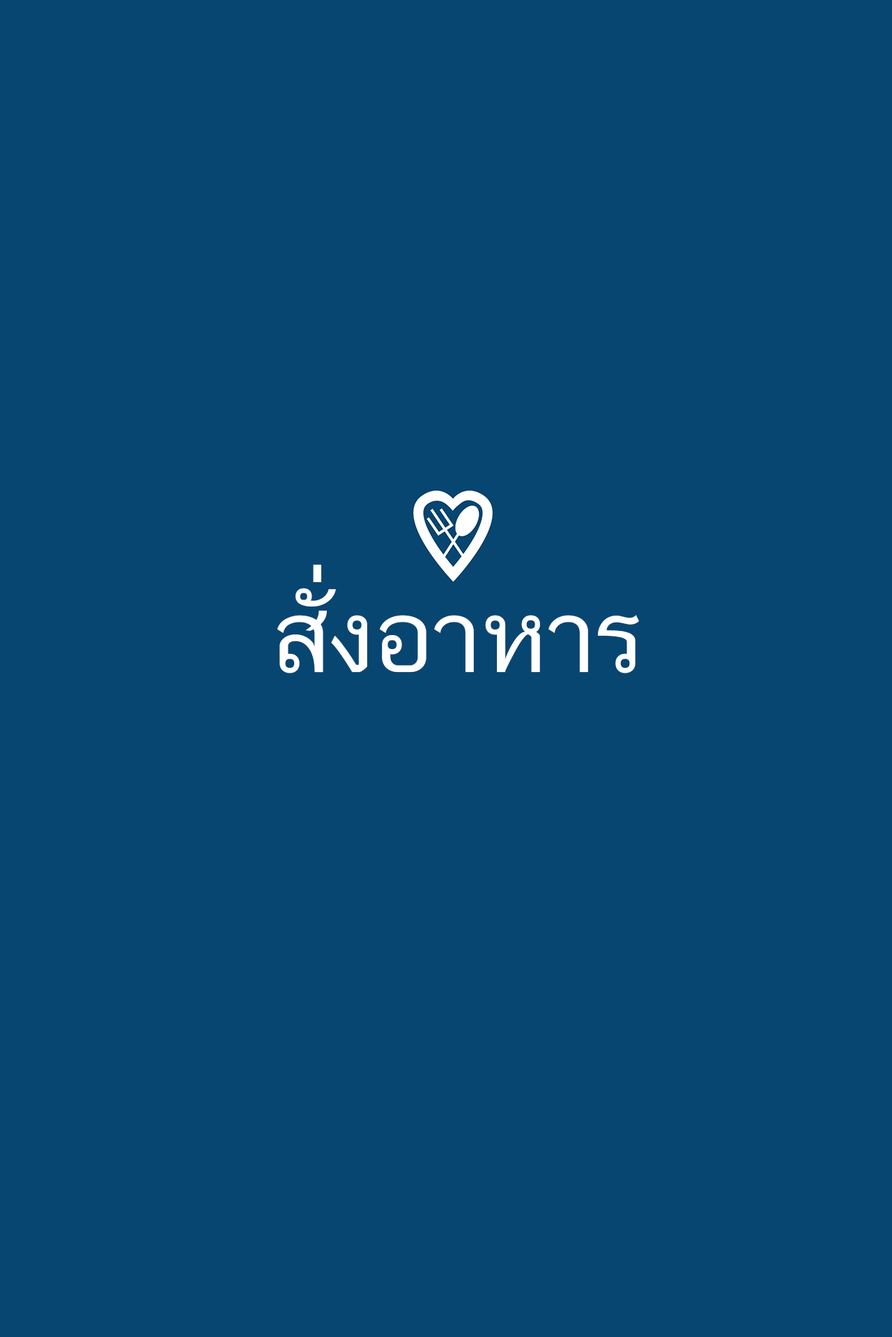
<style>
.page{position:relative;width:892px;height:1337px;background:#074671}
.page>*{position:absolute;margin:0}
.t1{font:101px "CSChatThaiUI";color:#ffffff}
</style>
<div class="page">
<p class="t1" style="left:277px;top:564px;width:362px;height:110px">สั่งอาหาร</p>
</div>
